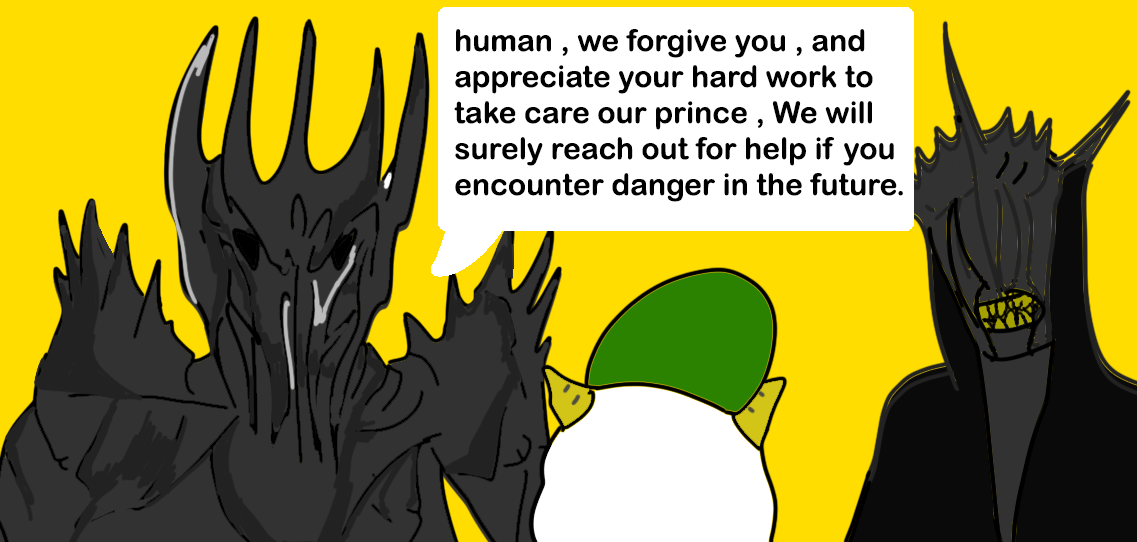
<style>
.page{position:relative;width:1137px;height:542px;background:#ffdd00}
.page>*{position:absolute;margin:0}
.t1{font:30px "ArialRoundedMTBold";color:#000000}
</style>
<div class="page">
<p class="t1" style="left:454px;top:29px;width:449px;height:173px">human , we forgive you , and <br>appreciate your hard work to <br>take care our prince , We will <br>surely reach out for help if you <br>encounter danger in the future.</p>
</div>
